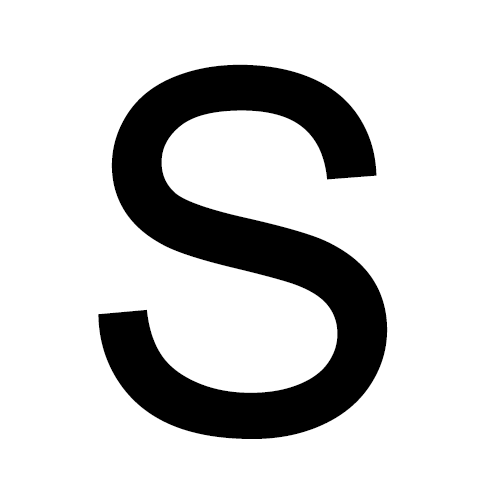
<style>
.page{position:relative;width:500px;height:500px;background:#ffffff}
.page>*{position:absolute;margin:0}
.t1{font:500px "ArialMT";color:#000000;font-weight:bold}
</style>
<div class="page">
<p class="t1" style="left:98px;top:64px;width:290px;height:375px">S</p>
</div>
